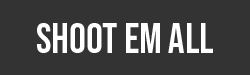
<style>
.page{position:relative;width:250px;height:75px;background:#333333}
.page>*{position:absolute;margin:0}
.t1{font:41.7px "BebasNeue-Regular";color:#ffffff}
</style>
<div class="page">
<p class="t1" style="left:37px;top:23px;width:176px;height:30px">shoot em all</p>
</div>
